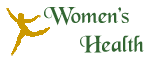
<style>
.page{position:relative;width:151px;height:57px;background:#ffffff}
.page>*{position:absolute;margin:0}
.t1{font:24px "BlackChancery";color:#336633}
</style>
<div class="page">
<p class="t1" style="left:44px;top:7px;width:100px;height:46px">Women’s<br>      Health</p>
</div>
